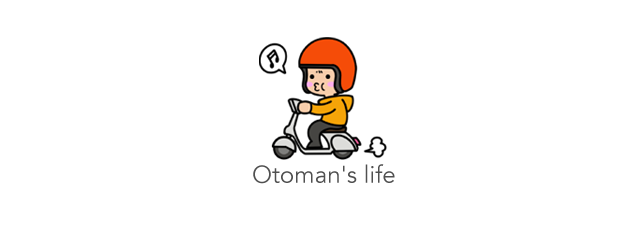
<style>
.page{position:relative;width:640px;height:240px;background:#ffffff}
.page>*{position:absolute;margin:0}
.t1{font:24px "Avenir-Book";color:#505050}
</style>
<div class="page">
<p class="t1" style="left:253px;top:164px;width:142px;height:20px">Otoman's life</p>
</div>
